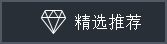
<style>
.page{position:relative;width:167px;height:44px;background:#292f37}
.page>*{position:absolute;margin:0}
.t1{font:16px "NSimSun";letter-spacing:0.05em;color:#ffffff}
</style>
<div class="page">
<p class="t1" style="left:75px;top:14px;width:66px;height:16px">精选推荐</p>
</div>
